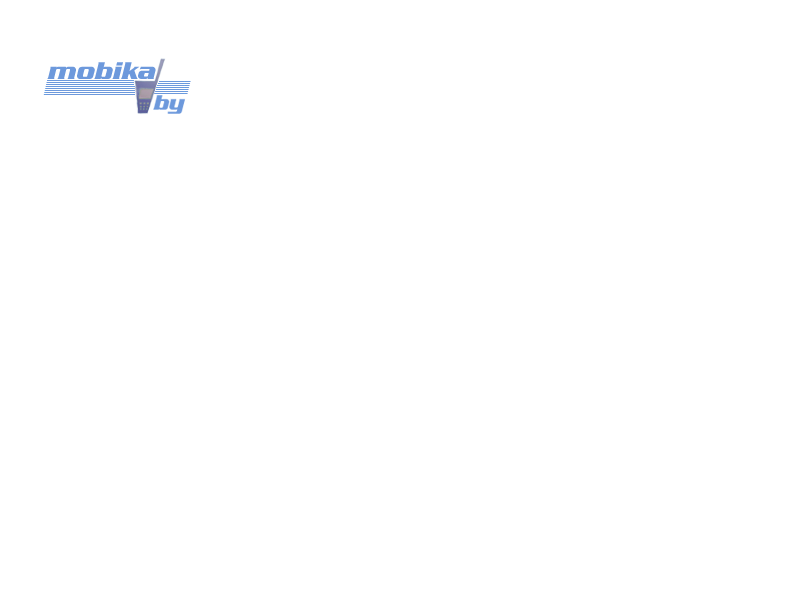
<style>
.page{position:relative;width:800px;height:600px;background:#ffffff}
.page>*{position:absolute;margin:0}
.t1{font:25px "SerpentineDEE-BoldItal";color:#6d99dc}
</style>
<div class="page">
<p class="t1" style="left:47px;top:62px;width:109px;height:17px">mobika</p>
</div>
